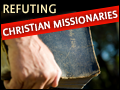
<style>
.page{position:relative;width:120px;height:90px}
.page>*{position:absolute;margin:0}
.t1{font:14px "Profile-Medium";color:#fef0b6;text-transform:uppercase}
.t2{font:11.6px "Profile-Medium";letter-spacing:-0.025em;color:#ffffff;text-transform:uppercase;font-weight:bold}
</style>
<div class="page">
<p class="t1" style="left:3px;top:4px;width:53px;height:10px">Refuting</p>
<p class="t2" style="left:3px;top:10px;width:115px;height:26px;rotate:-9deg">Christian Missionaries</p>
</div>
